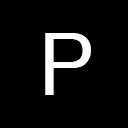
<style>
.page{position:relative;width:128px;height:128px;background:#000000}
.page>*{position:absolute;margin:0}
.t1{font:85.2px "Helvetica";letter-spacing:0.01em;color:#ffffff}
</style>
<div class="page">
<p class="t1" style="left:45px;top:33px;width:46px;height:62px">P</p>
</div>
